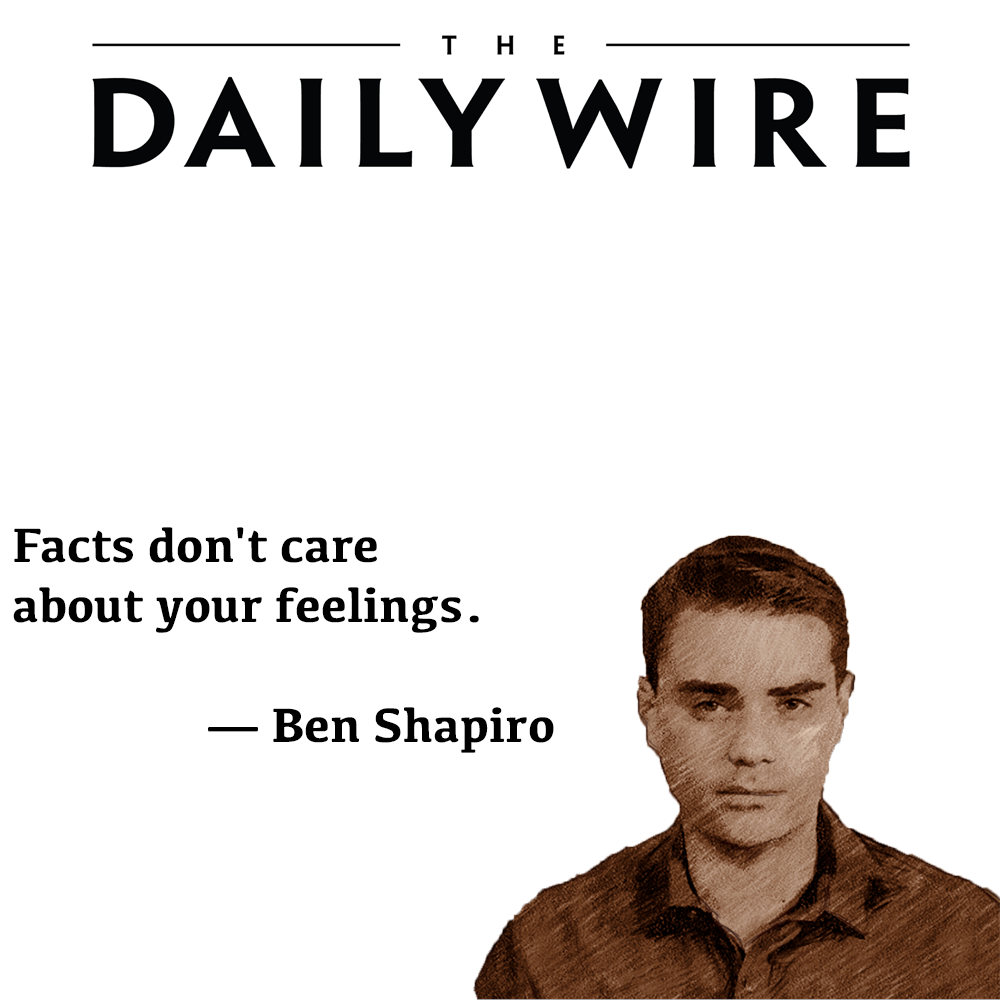
<style>
.page{position:relative;width:1000px;height:1000px;background:#ffffff}
.page>*{position:absolute;margin:0}
.t1{font:12px "Kefa-Bold";color:#000000}
</style>
<div class="page">
<p class="t1" style="left:13px;top:527px;width:541px;height:226px">Facts don't care <br>about your feelings.<br><br>                — Ben Shapiro</p>
</div>
